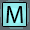
<style>
.page{position:relative;width:30px;height:30px}
.page>*{position:absolute;margin:0}
.t1{font:24px "MyriadPro-Regular";color:#000000}
</style>
<div class="page">
<p class="t1" style="left:6px;top:6px;width:17px;height:17px">M</p>
</div>
